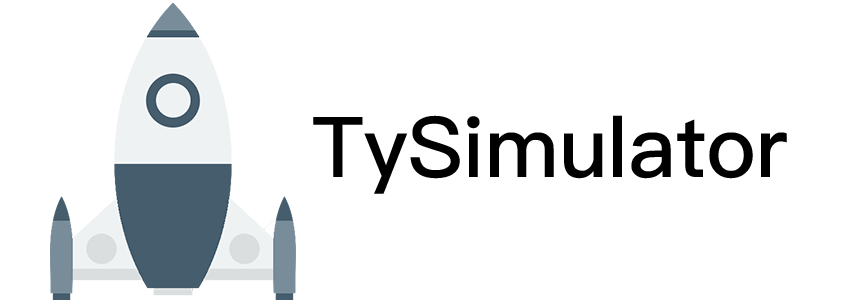
<style>
.page{position:relative;width:850px;height:300px;background:#ffffff}
.page>*{position:absolute;margin:0}
.t1{font:84px "PingFangSC-Medium";color:#000000}
</style>
<div class="page">
<p class="t1" style="left:313px;top:115px;width:474px;height:79px">TySimulator</p>
</div>
